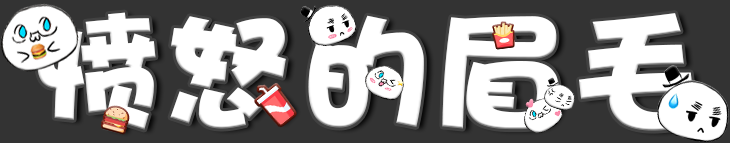
<style>
.page{position:relative;width:730px;height:143px;background:#ffffff}
.page>*{position:absolute;margin:0}
.t1{font:130px "DFPHaiBaoW12";letter-spacing:0.04em;color:#ffffff;text-transform:uppercase}
</style>
<div class="page">
<p class="t1" style="left:37px;top:12px;width:656px;height:120px">愤怒的眉毛</p>
</div>
